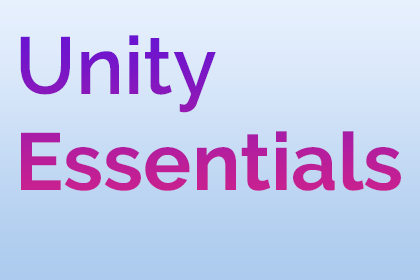
<style>
.page{position:relative;width:420px;height:280px}
.page>*{position:absolute;margin:0}
.t1{font:80.4px "Raleway-Bold"}
.t2{font:80.4px "Raleway-SemiBold"}
</style>
<div class="page">
<p class="t1" style="left:20px;top:35px;width:381px;height:156px"><span class="t2">Unity<br></span>Essentials</p>
</div>
